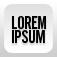
<style>
.page{position:relative;width:57px;height:57px}
.page>*{position:absolute;margin:0}
.t1{font:18px/14.6px "AlternateGothicNo2BT-Regular";letter-spacing:-0.02em;color:#000000;text-transform:uppercase}
</style>
<div class="page">
<p class="t1" style="left:12px;top:16px;width:34px;height:27px">Lorem<br>Ipsum</p>
</div>
